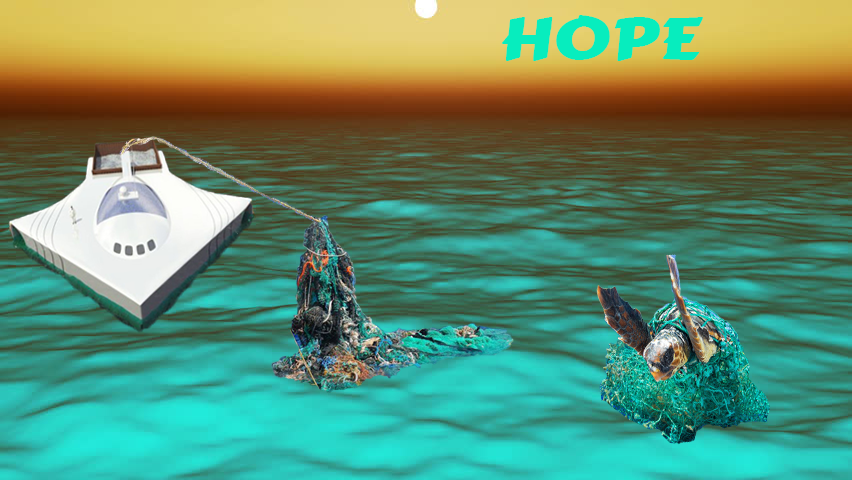
<style>
.page{position:relative;width:852px;height:480px}
.page>*{position:absolute;margin:0}
.t1{font:57.6px "CarterOne";color:#07edbe;scale:1.27 1}
</style>
<div class="page">
<p class="t1" style="left:501px;top:15px;width:202px;height:46px">HOPE</p>
</div>
